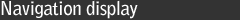
<style>
.page{position:relative;width:240px;height:20px;background:#333333}
.page>*{position:absolute;margin:0}
.t1{font:19px "BellGothicStd-Bold";letter-spacing:-0.025em;color:#ffffff}
</style>
<div class="page">
<p class="t1" style="left:1px;top:0px;width:137px;height:19px">Navigation display</p>
</div>
